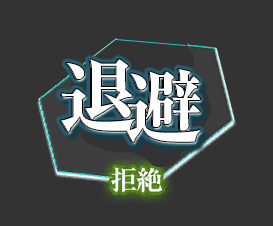
<style>
.page{position:relative;width:273px;height:226px;background:#333333}
.page>*{position:absolute;margin:0}
.t1{font:80px/11px "RyuminPr6N-ExBold";color:#ffffff}
</style>
<div class="page">
<p class="t1" style="left:60px;top:59px;width:140px;height:83px;text-align:center">退<br>     避</p>
<p class="t1" style="left:61px;top:59px;width:140px;height:83px;text-align:center">退<br>     避</p>
</div>
